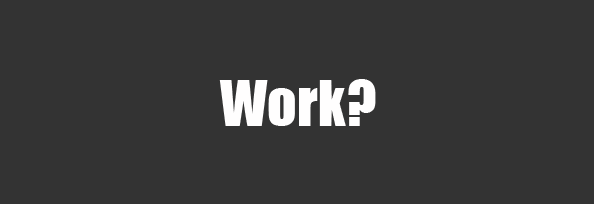
<style>
.page{position:relative;width:594px;height:204px;background:#333333}
.page>*{position:absolute;margin:0}
.t1{font:58.3px "Impact";color:#fffefe}
</style>
<div class="page">
<p class="t1" style="left:219px;top:79px;width:157px;height:47px">Work?</p>
</div>
